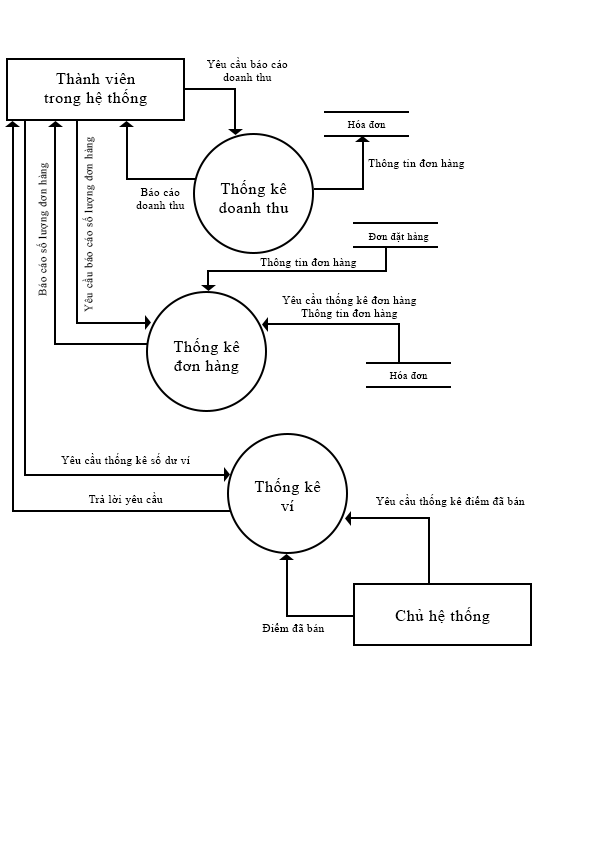
<style>
.page{position:relative;width:595px;height:842px;background:#ffffff}
.page>*{position:absolute;margin:0}
.t1{font:11px "TimesNewRomanPSMT";letter-spacing:0.05em;color:#000000}
.t2{font:15.9px "TimesNewRomanPSMT";letter-spacing:0.05em;color:#000000}
.t3{font:10px "TimesNewRomanPSMT";letter-spacing:0.05em;color:#000000}
</style>
<div class="page">
<p class="t1" style="left:207px;top:57px;width:81px;height:24px;text-align:center">Yêu cầu báo cáo<br>doanh thu</p>
<p class="t2" style="left:44px;top:73px;width:103px;height:33px;text-align:center">Thành viên<br>trong hệ thống</p>
<p class="t3" style="left:347px;top:120px;width:39px;height:8px">Hóa đơn</p>
<p class="t1" style="left:82px;top:136px;width:13px;height:176px;rotate:-90deg">Yêu cầu báo cáo số lượng đơn hàng</p>
<p class="t1" style="left:368px;top:159px;width:97px;height:10px">Thông tin đơn hàng</p>
<p class="t1" style="left:36px;top:162px;width:13px;height:134px;rotate:-90deg">Báo cáo số lượng đơn hàng</p>
<p class="t2" style="left:219px;top:180px;width:70px;height:33px;text-align:center">Thống kê<br>doanh thu</p>
<p class="t1" style="left:136px;top:188px;width:49px;height:21px;text-align:center">Báo cáo<br>doanh thu</p>
<p class="t3" style="left:368px;top:232px;width:61px;height:10px">Đơn đặt hàng</p>
<p class="t1" style="left:260px;top:258px;width:97px;height:10px">Thông tin đơn hàng</p>
<p class="t1" style="left:282px;top:293px;width:135px;height:26px;text-align:center">Yêu cầu thống kê đơn hàng<br>Thông tin đơn hàng</p>
<p class="t2" style="left:173px;top:338px;width:67px;height:36px;text-align:center">Thống kê<br>đơn hàng</p>
<p class="t3" style="left:389px;top:371px;width:39px;height:8px">Hóa đơn</p>
<p class="t1" style="left:61px;top:453px;width:129px;height:13px">Yêu cầu thống kê số dư ví</p>
<p class="t2" style="left:254px;top:478px;width:67px;height:33px;text-align:center">Thống kê<br>ví</p>
<p class="t1" style="left:88px;top:492px;width:75px;height:13px">Trả lời yêu cầu</p>
<p class="t1" style="left:376px;top:494px;width:149px;height:13px">Yêu cầu thống kê điểm đã bán</p>
<p class="t2" style="left:395px;top:607px;width:95px;height:17px">Chủ hệ thống</p>
<p class="t1" style="left:262px;top:623px;width:63px;height:9px">Điểm đã bán</p>
</div>
